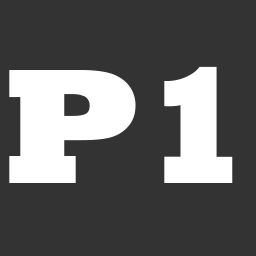
<style>
.page{position:relative;width:256px;height:256px;background:#333333}
.page>*{position:absolute;margin:0}
.t1{font:166.7px "Rockwell-ExtraBold";color:#ffffff}
</style>
<div class="page">
<p class="t1" style="left:9px;top:66px;width:224px;height:117px">P1</p>
</div>
